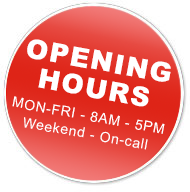
<style>
.page{position:relative;width:190px;height:192px;background:#ffffff}
.page>*{position:absolute;margin:0}
.t1{font:27px "Arial-Black";letter-spacing:0.05em;color:#ffffff;text-transform:uppercase}
.t2{font:14px/18px "ArialMT";letter-spacing:0.05em;color:#ffffff;text-transform:uppercase}
.t3{font:14px/18px "ArialMT";letter-spacing:0.05em;color:#ffffff}
</style>
<div class="page">
<p class="t1" style="left:27px;top:39px;width:144px;height:43px;rotate:10deg">OPENING</p>
<p class="t1" style="left:38px;top:68px;width:111px;height:39px;rotate:10deg">HOURS</p>
<p class="t2" style="left:12px;top:96px;width:153px;height:54px;text-align:center;rotate:10deg">MON-FRI - 8AM - 5PM<br>W<span class="t3">eekend - On-call</span></p>
</div>
